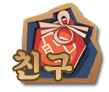
<style>
.page{position:relative;width:109px;height:92px;background:#ffffff}
.page>*{position:absolute;margin:0}
.t1{font:31.1px "SDKukdetopokki-bBd";letter-spacing:0.08em;color:#d8ac7b}
</style>
<div class="page">
<p class="t1" style="left:14px;top:51px;width:58px;height:29px">친구</p>
</div>
